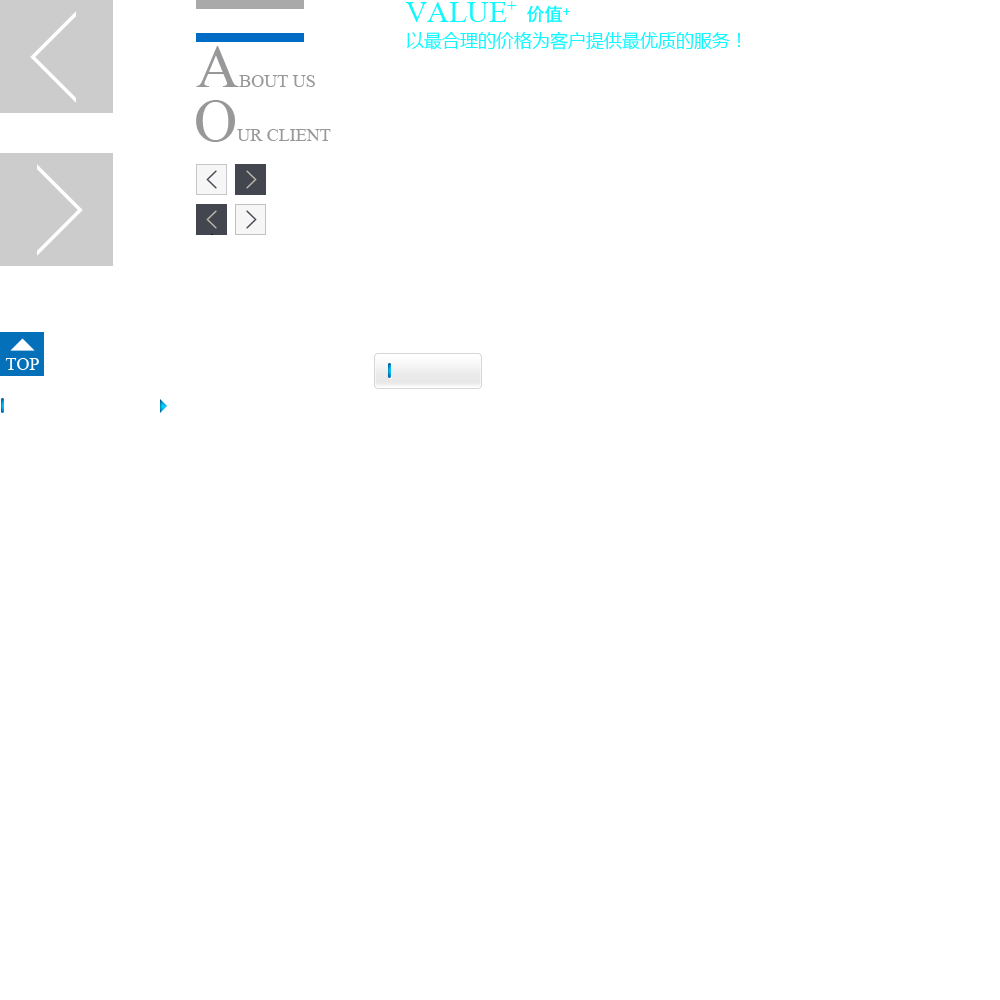
<style>
.page{position:relative;width:1000px;height:1000px;background:#ffffff}
.page>*{position:absolute;margin:0}
.t1{font:30px "MongolianBaiti";color:#11f7ff}
.t2{font:18px "AdobeHeitiStd-Regular";color:#11f7ff}
.t3{font:18px "MicrosoftYaHei";color:#11f7ff}
.t4{font:18px "MongolianBaiti";color:#989799}
.t5{font:60px "MongolianBaiti";color:#989799}
.t6{font:18px "MongolianBaiti";color:#999899}
.t7{font:60px "MongolianBaiti";color:#999899}
</style>
<div class="page">
<p class="t1" style="left:405px;top:1px;width:112px;height:21px">VALUE+</p>
<p class="t2" style="left:527px;top:5px;width:43px;height:18px">价值+</p>
<p class="t3" style="left:406px;top:31px;width:335px;height:19px">以最合理的价格为客户提供最优质的服务！</p>
<p class="t4" style="left:196px;top:46px;width:119px;height:41px"><span class="t5">A</span>BOUT US</p>
<p class="t6" style="left:196px;top:100px;width:135px;height:42px"><span class="t7">O</span>UR CLIENT</p>
</div>
